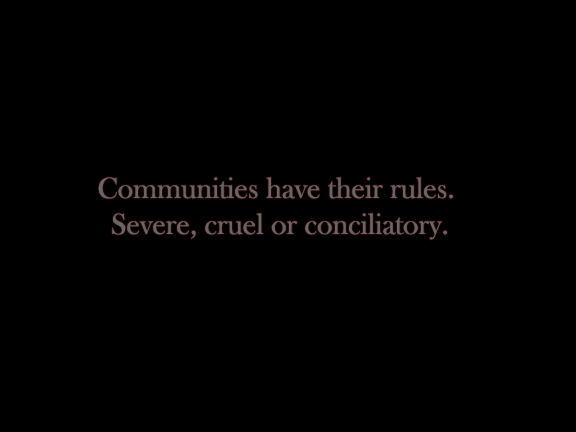
<style>
.page{position:relative;width:576px;height:432px;background:#000000}
.page>*{position:absolute;margin:0}
.t1{font:30px "BaskOldFace";color:#686666}
</style>
<div class="page">
<p class="t1" style="left:98px;top:177px;width:355px;height:63px;text-align:center">Communities have their rules. <br>Severe, cruel or conciliatory.</p>
</div>
